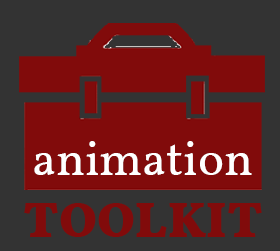
<style>
.page{position:relative;width:280px;height:251px;background:#333333}
.page>*{position:absolute;margin:0}
.t1{font:48.5px "Vollkorn-Regular";color:#ffffff}
.t2{font:50.2px "Vollkorn-Bold";color:#810b0b}
</style>
<div class="page">
<p class="t1" style="left:34px;top:141px;width:218px;height:34px">animation</p>
<p class="t2" style="left:24px;top:203px;width:238px;height:34px">TOOLKIT</p>
</div>
